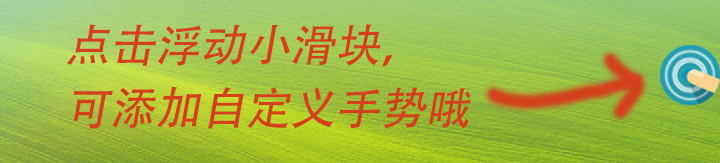
<style>
.page{position:relative;width:720px;height:163px}
.page>*{position:absolute;margin:0}
.t1{font:45px "AdobeHeitiStd-Regular";color:#d43f1c;font-style:italic}
</style>
<div class="page">
<p class="t1" style="left:66px;top:24px;width:405px;height:105px">点击浮动小滑块，<br>可添加自定义手势哦</p>
</div>
